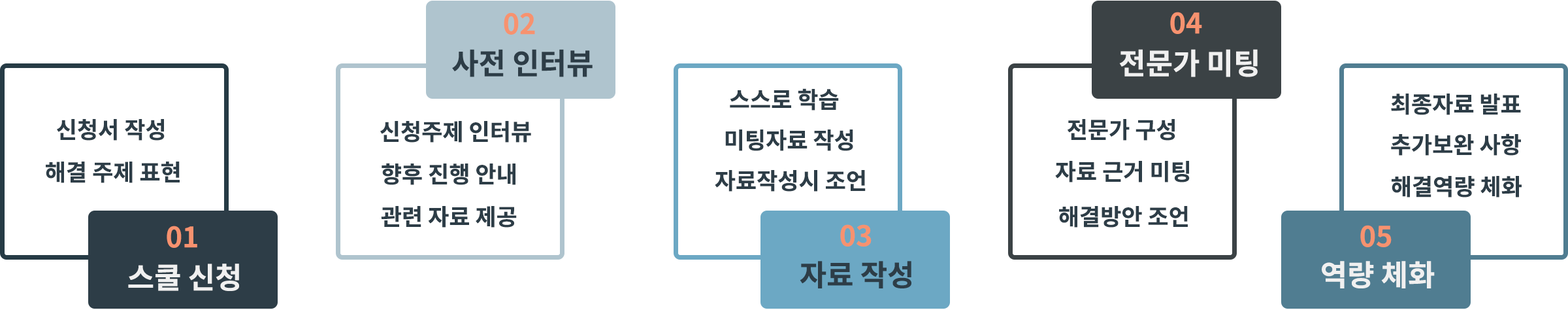
<style>
.page{position:relative;width:1568px;height:310px;background:#ffffff}
.page>*{position:absolute;margin:0}
.t1{font:28.1px "NotoSansCJKkr-Bold";color:#f7926f}
.t2{font:29.4px "NotoSansCJKkr-Bold";color:#2d3d47}
.t3{font:29.4px "NotoSansCJKkr-Bold";color:#f0f0f0}
.t4{font:22.9px "NotoSansCJKkr-Bold";color:#2d3d47}
</style>
<div class="page">
<p class="t1" style="left:504px;top:12px;width:31px;height:23px">02</p>
<p class="t1" style="left:1170px;top:12px;width:32px;height:22px">04</p>
<p class="t2" style="left:452px;top:49px;width:141px;height:28px">사전 인터뷰</p>
<p class="t3" style="left:1119px;top:49px;width:139px;height:28px">전문가 미팅</p>
<p class="t4" style="left:730px;top:88px;width:109px;height:22px">스스로 학습</p>
<p class="t4" style="left:1391px;top:93px;width:130px;height:22px">최종자료 발표</p>
<p class="t4" style="left:57px;top:119px;width:108px;height:21px">신청서 작성</p>
<p class="t4" style="left:380px;top:121px;width:151px;height:21px">신청주제 인터뷰</p>
<p class="t4" style="left:1068px;top:119px;width:107px;height:21px">전문가 구성</p>
<p class="t4" style="left:725px;top:129px;width:128px;height:22px">미팅자료 작성</p>
<p class="t4" style="left:1391px;top:133px;width:130px;height:22px">추가보완 사항</p>
<p class="t4" style="left:46px;top:161px;width:134px;height:22px">해결 주제 표현</p>
<p class="t4" style="left:1055px;top:161px;width:135px;height:21px">자료 근거 미팅</p>
<p class="t4" style="left:382px;top:163px;width:133px;height:22px">향후 진행 안내</p>
<p class="t4" style="left:715px;top:170px;width:151px;height:21px">자료작성시 조언</p>
<p class="t4" style="left:1392px;top:176px;width:130px;height:21px">해결역량 체화</p>
<p class="t4" style="left:381px;top:206px;width:136px;height:21px">관련 자료 제공</p>
<p class="t4" style="left:1059px;top:206px;width:129px;height:21px">해결방안 조언</p>
<p class="t1" style="left:167px;top:225px;width:30px;height:23px">01</p>
<p class="t1" style="left:840px;top:224px;width:32px;height:22px">03</p>
<p class="t1" style="left:1360px;top:225px;width:32px;height:22px">05</p>
<p class="t3" style="left:128px;top:263px;width:111px;height:28px">스쿨 신청</p>
<p class="t2" style="left:800px;top:261px;width:111px;height:27px">자료 작성</p>
<p class="t3" style="left:1322px;top:261px;width:113px;height:27px">역량 체화</p>
</div>
